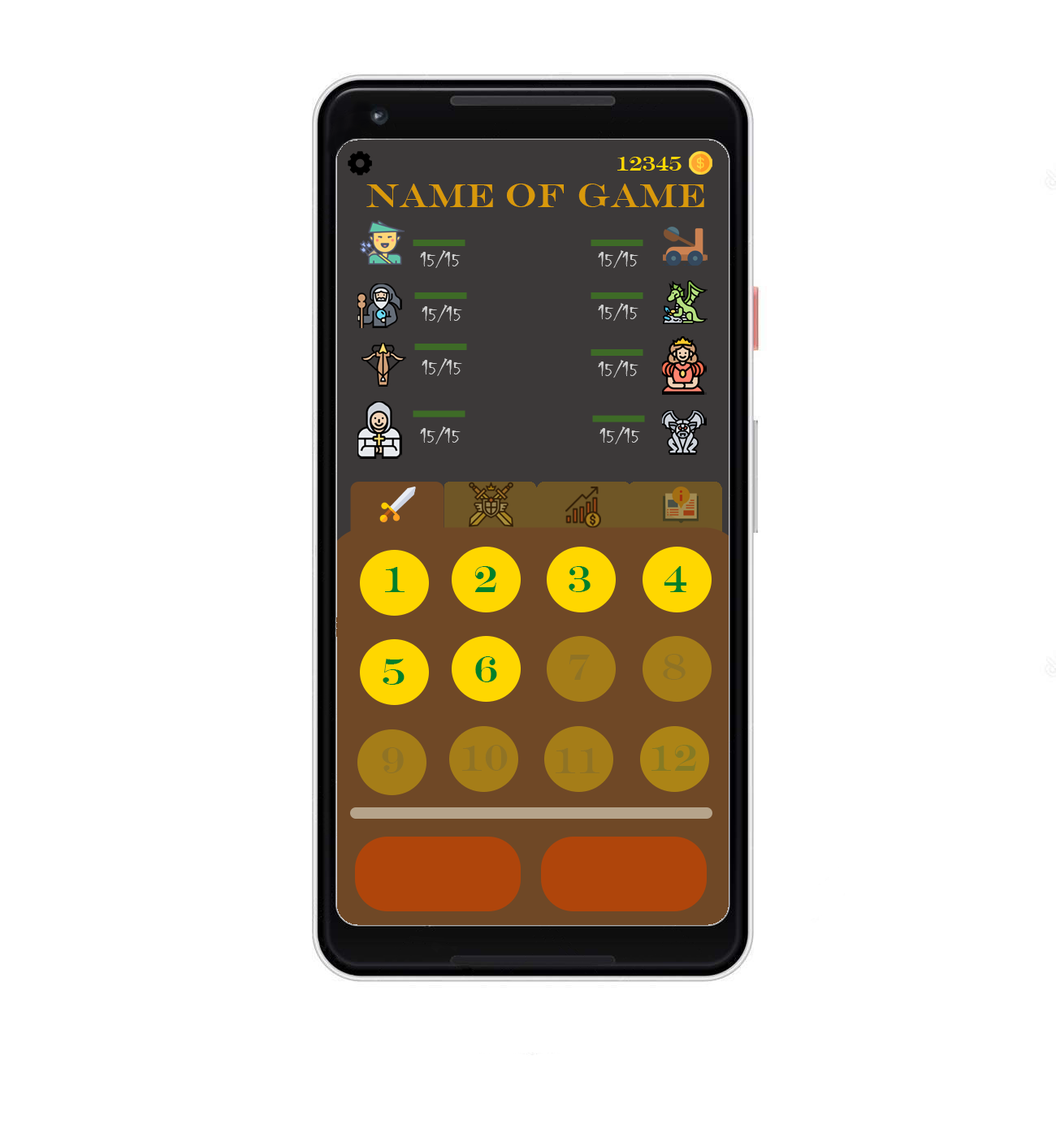
<style>
.page{position:relative;width:1056px;height:1129px;background:#ffffff}
.page>*{position:absolute;margin:0}
.t1{font:20.3px "EngraversMT";color:#ffd700}
.t2{font:33.8px "EngraversMT";color:#d9990b}
.t3{font:20.3px "Chiller-Regular";color:#d0d0d0}
.t4{font:37.2px "EngraversMT";color:#008029}
.t5{font:37.2px "EngraversMT";color:#907324}
.t6{font:37.2px "EngraversMT";color:#867a23}
</style>
<div class="page">
<p class="t1" style="left:617px;top:157px;width:65px;height:14px">12345</p>
<p class="t2" style="left:366px;top:184px;width:338px;height:23px">Name of Game</p>
<p class="t3" style="left:420px;top:250px;width:41px;height:18px">15/15</p>
<p class="t3" style="left:598px;top:250px;width:40px;height:18px">15/15</p>
<p class="t3" style="left:422px;top:305px;width:40px;height:17px">15/15</p>
<p class="t3" style="left:598px;top:303px;width:40px;height:18px">15/15</p>
<p class="t3" style="left:422px;top:358px;width:40px;height:18px">15/15</p>
<p class="t3" style="left:598px;top:360px;width:40px;height:18px">15/15</p>
<p class="t3" style="left:420px;top:426px;width:41px;height:18px">15/15</p>
<p class="t3" style="left:600px;top:426px;width:40px;height:18px">15/15</p>
<p class="t4" style="left:385px;top:567px;width:20px;height:25px">1</p>
<p class="t4" style="left:474px;top:566px;width:22px;height:26px">2</p>
<p class="t4" style="left:569px;top:566px;width:22px;height:26px">3</p>
<p class="t4" style="left:664px;top:566px;width:22px;height:26px">4</p>
<p class="t5" style="left:663px;top:654px;width:23px;height:26px">8</p>
<p class="t4" style="left:383px;top:659px;width:22px;height:26px">5</p>
<p class="t4" style="left:475px;top:656px;width:22px;height:26px">6</p>
<p class="t5" style="left:569px;top:655px;width:21px;height:25px">7</p>
<p class="t5" style="left:382px;top:747px;width:22px;height:26px">9</p>
<p class="t5" style="left:462px;top:745px;width:46px;height:26px">10</p>
<p class="t5" style="left:556px;top:748px;width:44px;height:25px">11</p>
<p class="t6" style="left:651px;top:745px;width:45px;height:26px">12</p>
</div>
